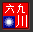
<style>
.page{position:relative;width:33px;height:32px;background:#f20000}
.page>*{position:absolute;margin:0}
.t1{font:10.4px "SimSun";color:#ffffff}
.t2{font:11.7px "SimSun";color:#ffffff}
</style>
<div class="page">
<p class="t1" style="left:5px;top:4px;width:20px;height:9px">六九</p>
<p class="t2" style="left:16px;top:15px;width:11px;height:12px">川</p>
</div>
